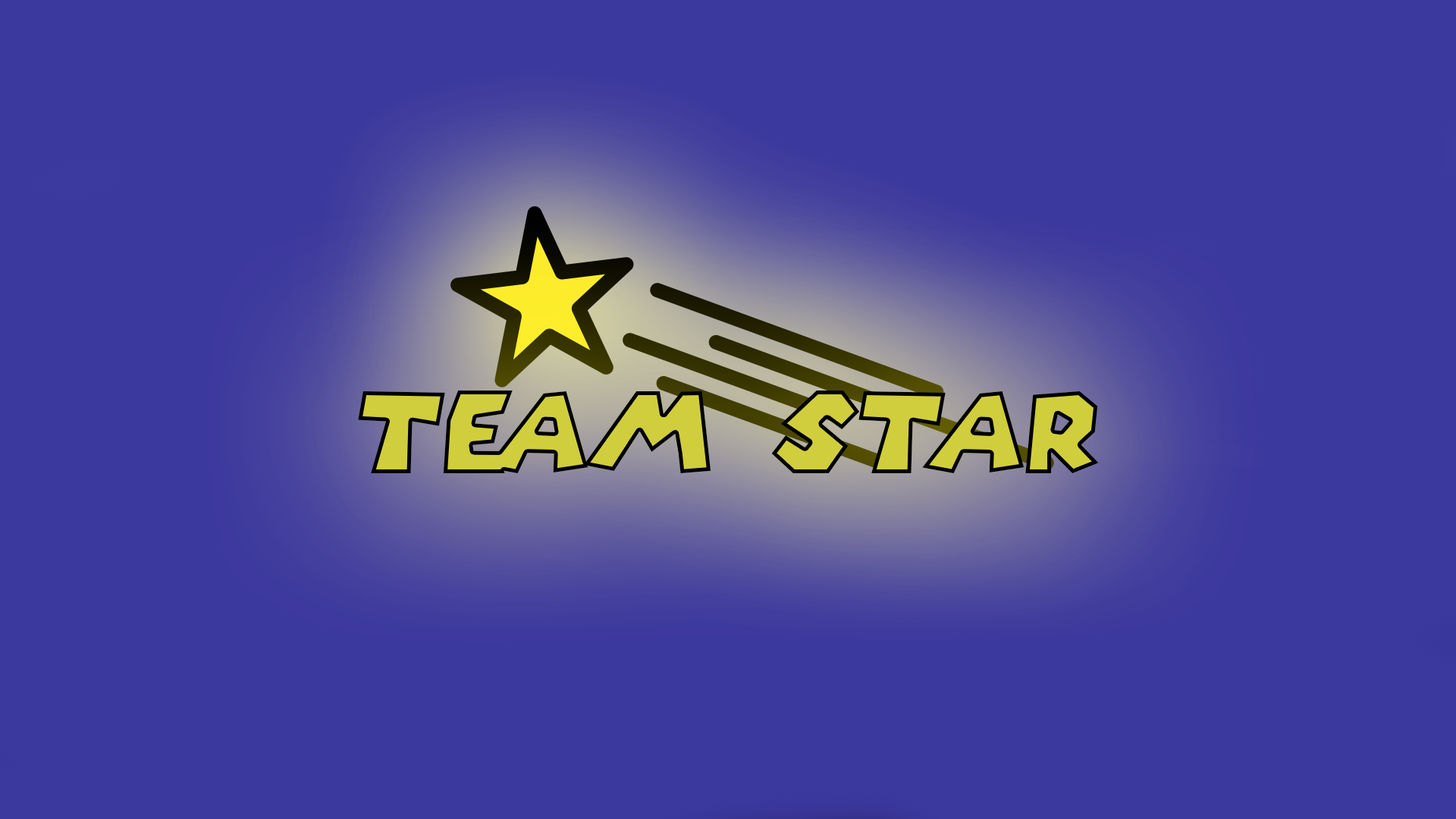
<style>
.page{position:relative;width:1456px;height:819px;background:#3b389e}
.page>*{position:absolute;margin:0}
.t1{font:110.6px "SuperMarioGalaxy";letter-spacing:0.01em;color:#d0ce3d;font-style:italic}
</style>
<div class="page">
<p class="t1" style="left:358px;top:391px;width:741px;height:82px">Team Star</p>
</div>
